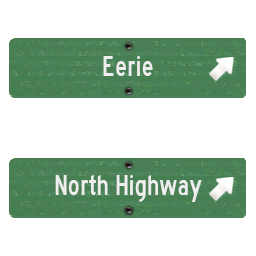
<style>
.page{position:relative;width:256px;height:256px;background:#ffffff}
.page>*{position:absolute;margin:0}
.t1{font:30px "HighwayGothicNarrow";color:#eeeeee;scale:0.95 1}
</style>
<div class="page">
<p class="t1" style="left:103px;top:56px;width:50px;height:20px">Eerie</p>
<p class="t1" style="left:55px;top:175px;width:147px;height:27px">North Highway</p>
</div>
